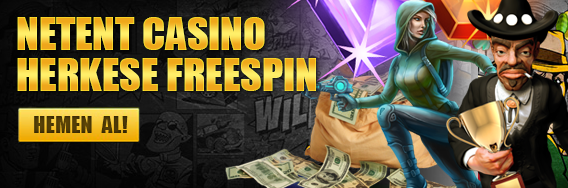
<style>
.page{position:relative;width:568px;height:188px}
.page>*{position:absolute;margin:0}
.t1{font:42px "Impact"}
.t2{font:21.5px "Impact";letter-spacing:0.025em;color:#4d3905;text-transform:uppercase}
</style>
<div class="page">
<p class="t1" style="left:17px;top:17px;width:248px;height:33px">NETENT CASINO</p>
<p class="t1" style="left:17px;top:58px;width:299px;height:33px">HERKESE FREESPIN</p>
<p class="t2" style="left:34px;top:116px;width:94px;height:17px">hemen  AL!</p>
</div>
